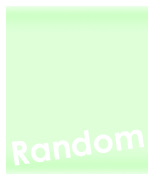
<style>
.page{position:relative;width:154px;height:180px;background:#deffd8}
.page>*{position:absolute;margin:0}
.t1{font:33.3px "CenturyGothic-Bold";color:#ffffff}
</style>
<div class="page">
<p class="t1" style="left:11px;top:129px;width:133px;height:37px;rotate:-8deg">Random</p>
</div>
